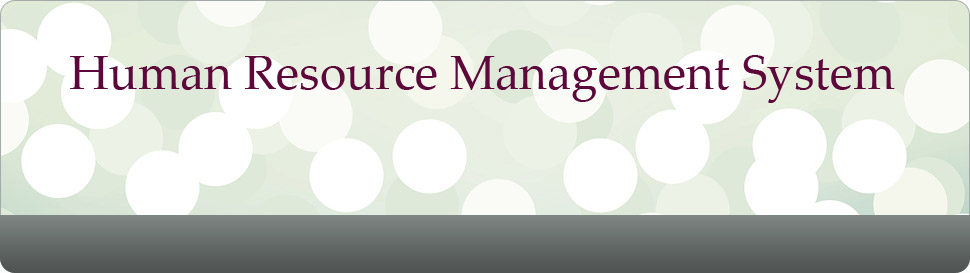
<style>
.page{position:relative;width:970px;height:273px}
.page>*{position:absolute;margin:0}
.t1{font:48px "PalatinoLinotype-Roman";color:#5c083a}
</style>
<div class="page">
<p class="t1" style="left:70px;top:55px;width:825px;height:48px">Human Resource Management System</p>
</div>
